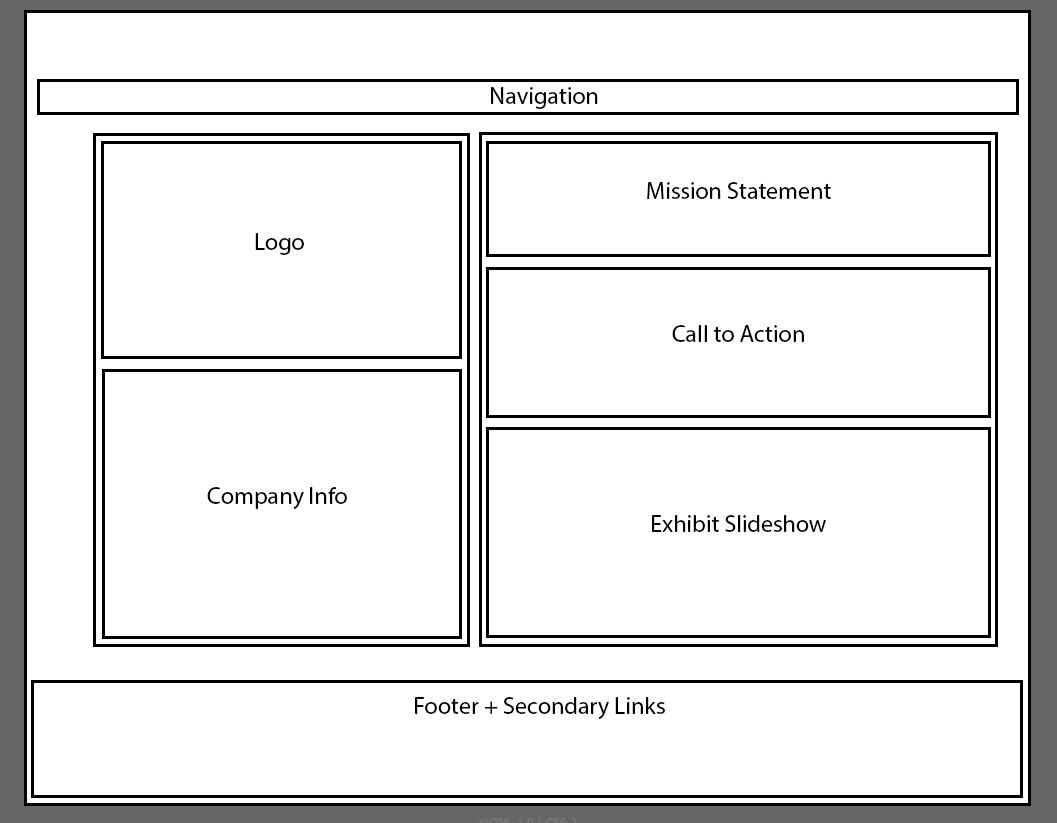
<style>
.page{position:relative;width:1057px;height:823px;background:#ffffff}
.page>*{position:absolute;margin:0}
.t1{font:24px "MyriadPro-Regular";color:#000000}
</style>
<div class="page">
<p class="t1" style="left:491px;top:87px;width:107px;height:22px">Navigation</p>
<p class="t1" style="left:647px;top:182px;width:184px;height:17px">Mission Statement</p>
<p class="t1" style="left:255px;top:233px;width:49px;height:22px">Logo</p>
<p class="t1" style="left:672px;top:325px;width:132px;height:17px">Call to Action</p>
<p class="t1" style="left:207px;top:487px;width:140px;height:22px">Company Info</p>
<p class="t1" style="left:652px;top:515px;width:174px;height:17px">Exhibit Slideshow</p>
<p class="t1" style="left:415px;top:697px;width:250px;height:22px">Footer + Secondary Links</p>
</div>
